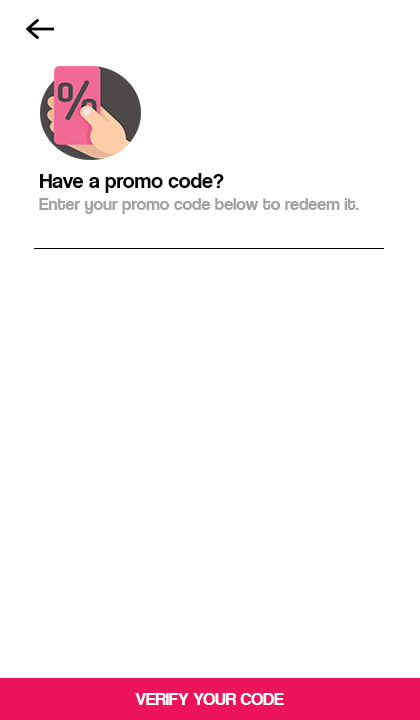
<style>
.page{position:relative;width:420px;height:720px;background:#ffffff}
.page>*{position:absolute;margin:0}
.t1{font:22px "CoolveticaRg-Regular";color:#070606}
.t2{font:18px "CoolveticaRg-Regular";color:#a1a1a1}
.t3{font:18px "CoolveticaRg-Regular";color:#ffffff}
</style>
<div class="page">
<p class="t1" style="left:40px;top:173px;width:184px;height:20px">Have a promo code?</p>
<p class="t2" style="left:39px;top:198px;width:320px;height:16px">Enter your promo code below to redeem it.</p>
<p class="t3" style="left:135px;top:693px;width:149px;height:12px">VERIFY YOUR CODE</p>
</div>
